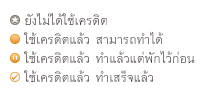
<style>
.page{position:relative;width:208px;height:94px;background:#ffffff}
.page>*{position:absolute;margin:0}
.t1{font:18px "TEPCCMPrasanmit";color:#3b2d2d}
.t2{font:18px "TEPCCMPrasanmit"}
</style>
<div class="page">
<p class="t1" style="left:25px;top:12px;width:82px;height:13px">ยังไม่ได้ใช้เครดิต</p>
<p class="t2" style="left:24px;top:31px;width:140px;height:13px">ใช้เครดิตแล้ว สามารถทำได้</p>
<p class="t1" style="left:24px;top:50px;width:171px;height:13px">ใช้เครดิตแล้ว ทำแล้วแต่พักไว้ก่อน</p>
<p class="t1" style="left:24px;top:70px;width:129px;height:12px">ใช้เครดิตแล้ว ทำเสร็จแล้ว</p>
</div>
